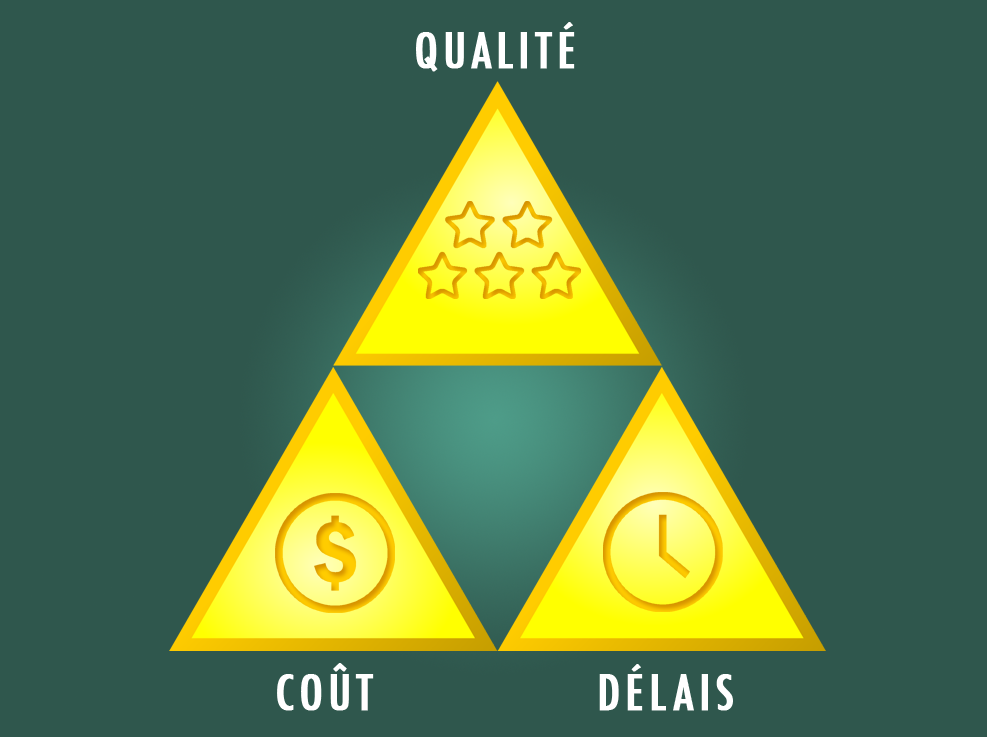
<style>
.page{position:relative;width:987px;height:737px;background:#2f574d}
.page>*{position:absolute;margin:0}
.t1{font:48px "Futura-CondensedMedium";letter-spacing:0.1em;color:#ffffff;font-weight:bold}
</style>
<div class="page">
<p class="t1" style="left:416px;top:22px;width:159px;height:50px">QUALITÉ</p>
<p class="t1" style="left:277px;top:663px;width:97px;height:48px">COÛT</p>
<p class="t1" style="left:599px;top:664px;width:134px;height:47px">DÉLAIS</p>
</div>
